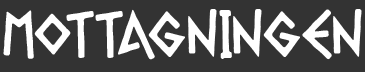
<style>
.page{position:relative;width:365px;height:72px;background:#333333}
.page>*{position:absolute;margin:0}
.t1{font:67px "mtgn2017,GelioFasolada";color:#ffffff}
</style>
<div class="page">
<p class="t1" style="left:3px;top:9px;width:359px;height:51px">MOTTAGNINGEN</p>
</div>
